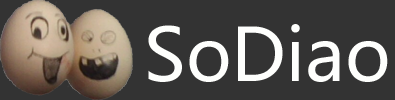
<style>
.page{position:relative;width:395px;height:100px;background:#333333}
.page>*{position:absolute;margin:0}
.t1{font:72px "MicrosoftYaHei";color:#fefffd}
</style>
<div class="page">
<p class="t1" style="left:148px;top:24px;width:240px;height:58px">SoDiao</p>
</div>
